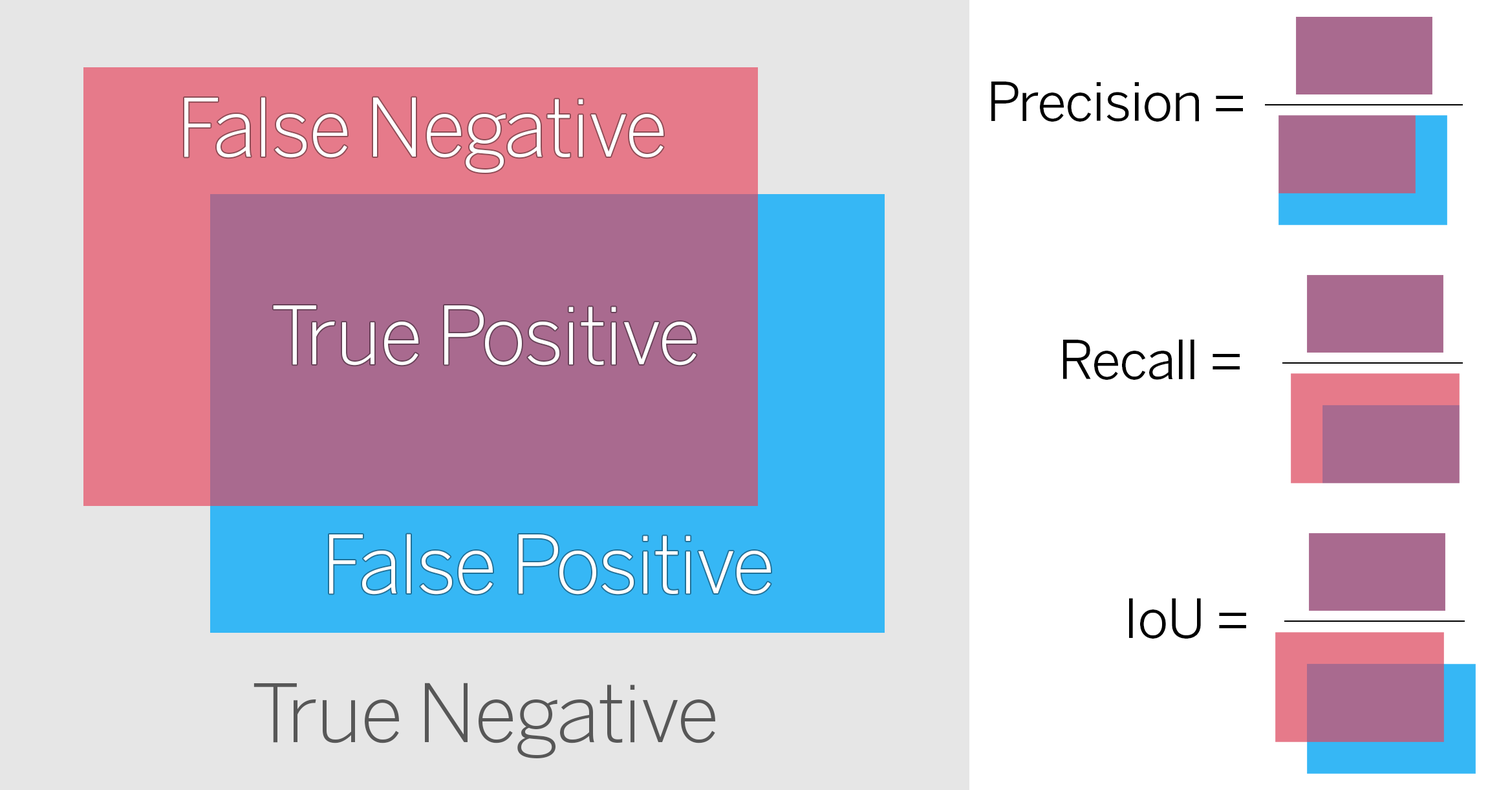
<style>
.page{position:relative;width:1510px;height:790px;background:#e6e6e6}
.page>*{position:absolute;margin:0}
.t1{font:53.5px "BentonSans-Book";letter-spacing:-0.02em;color:#000000}
.t2{font:79.7px "BentonSans-Light";letter-spacing:-0.02em;color:#ffffff}
.t3{font:79.7px "BentonSans-Light";letter-spacing:-0.02em;color:#575757}
</style>
<div class="page">
<p class="t1" style="left:991px;top:81px;width:252px;height:41px">Precision =</p>
<p class="t2" style="left:184px;top:97px;width:480px;height:76px">False Negative</p>
<p class="t2" style="left:273px;top:305px;width:424px;height:60px">True Positive</p>
<p class="t1" style="left:1063px;top:339px;width:177px;height:41px">Recall =</p>
<p class="t2" style="left:329px;top:534px;width:442px;height:60px">False Positive</p>
<p class="t1" style="left:1129px;top:598px;width:117px;height:40px">IoU =</p>
<p class="t3" style="left:254px;top:682px;width:461px;height:76px">True Negative</p>
</div>
